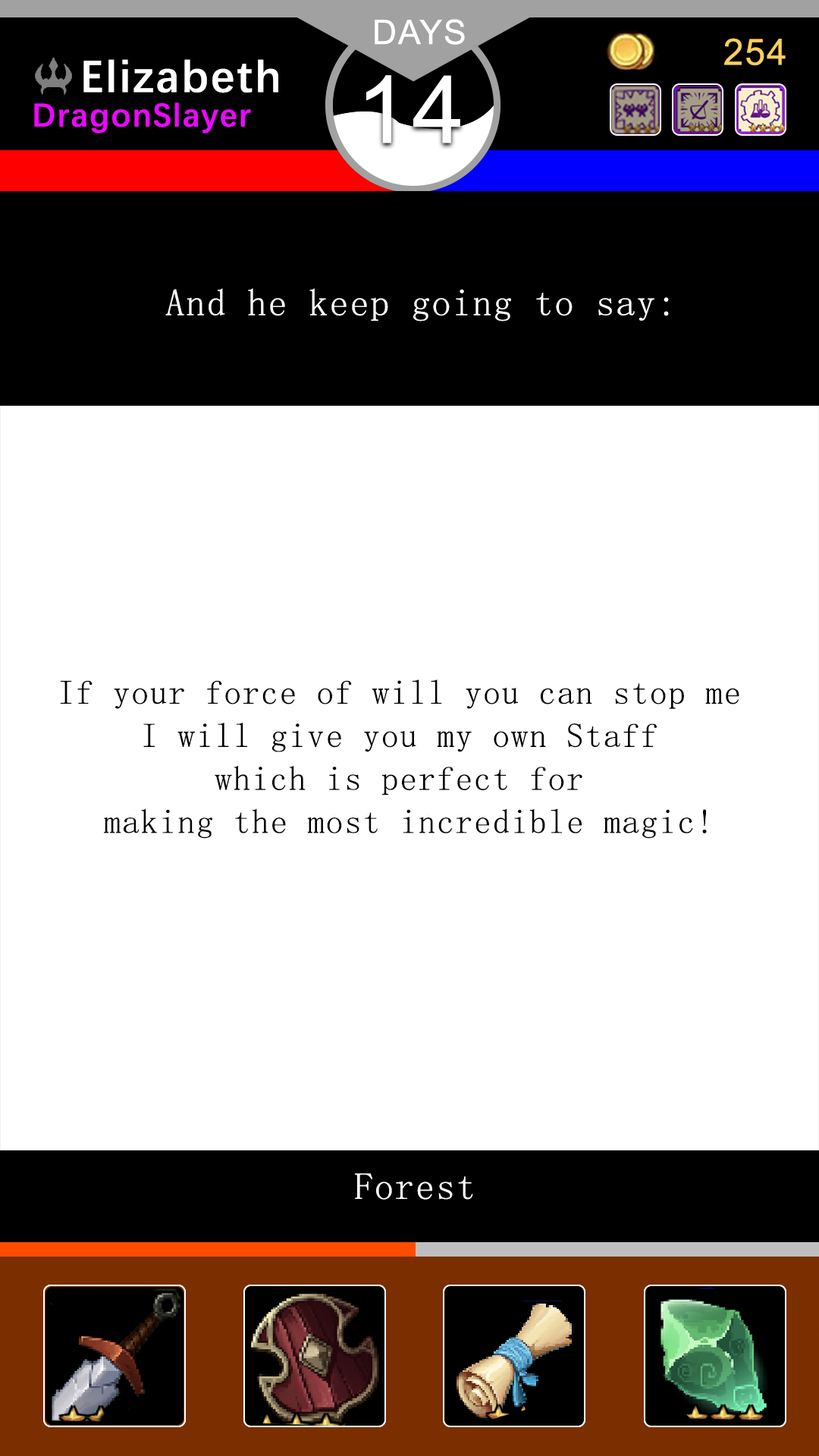
<style>
.page{position:relative;width:819px;height:1456px;background:#ffffff}
.page>*{position:absolute;margin:0}
.t1{font:37.9px "SimSun";letter-spacing:0.04em;color:#ffffff}
.t2{font:34.3px/43.1px "SimSun";letter-spacing:0.04em;color:#000000}
</style>
<div class="page">
<p class="t1" style="left:165px;top:288px;width:504px;height:34px">And he keep going to say:</p>
<p class="t2" style="left:60px;top:679px;width:679px;height:160px;text-align:center">If your force of will you can stop me <br>I will give you my own Staff <br>which is perfect for <br>making the most incredible magic!</p>
<p class="t1" style="left:355px;top:1173px;width:118px;height:27px">Forest</p>
</div>
